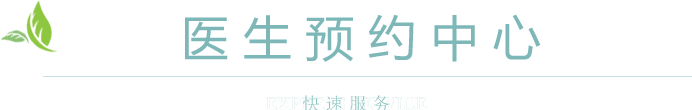
<style>
.page{position:relative;width:692px;height:110px;background:#ffffff}
.page>*{position:absolute;margin:0}
.t1{font:48px "MicrosoftYaHei";letter-spacing:0.3em;color:#7db7b7}
.t2{font:18px "SimSun";letter-spacing:0.3em;color:#8ec5c0;text-transform:uppercase}
</style>
<div class="page">
<p class="t1" style="left:185px;top:14px;width:356px;height:48px">医生预约中心</p>
<p class="t2" style="left:303px;top:95px;width:87px;height:17px">快速服务</p>
</div>
